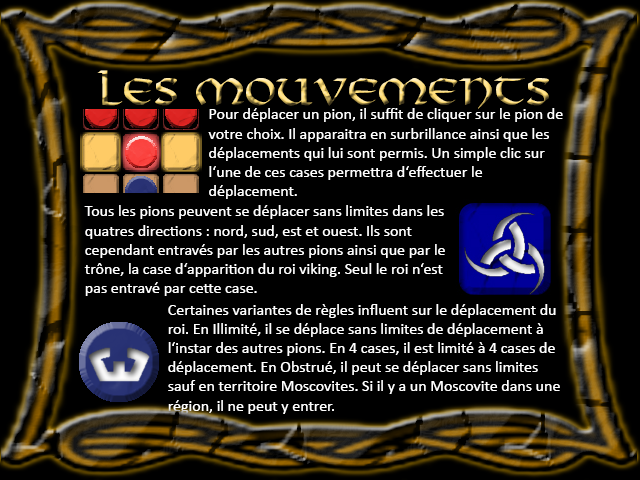
<style>
.page{position:relative;width:640px;height:480px;background:#000000}
.page>*{position:absolute;margin:0}
.t1{font:36px "Viking-Normal"}
.t2{font:16px "Calibri";color:#ffffff}
</style>
<div class="page">
<p class="t1" style="left:97px;top:70px;width:452px;height:39px">Les mouvements</p>
<p class="t2" style="left:208px;top:108px;width:355px;height:91px">Pour déplacer un pion, il suffit de cliquer sur le pion de votre choix. Il apparaitra en surbrillance ainsi que les déplacements qui lui sont permis. Un simple clic sur l‘une de ces cases permettra d‘effectuer le déplacement.</p>
<p class="t2" style="left:84px;top:205px;width:361px;height:91px">Tous les pions peuvent se déplacer sans limites dans les quatres directions : nord, sud, est et ouest. Ils sont cependant entravés par les autres pions ainsi que par le trône, la case d‘apparition du roi viking. Seul le roi n‘est pas entravé par cette case.</p>
<p class="t2" style="left:168px;top:304px;width:392px;height:110px">Certaines variantes de règles influent sur le déplacement du roi. En Illimité, il se déplace sans limites de déplacement à l‘instar des autres pions. En 4 cases, il est limité à 4 cases de déplacement. En Obstrué, il peut se déplacer sans limites sauf en territoire Moscovites. Si il y a un Moscovite dans une région, il ne peut y entrer.</p>
</div>
